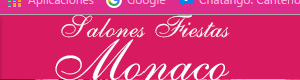
<style>
.page{position:relative;width:300px;height:80px;background:#d81b60}
.page>*{position:absolute;margin:0}
.t1{font:30px "ALSScript";color:#fff7f7}
.t2{font:58px "ALSScript";color:#ffffff}
</style>
<div class="page">
<p class="t1" style="left:61px;top:14px;width:169px;height:24px">Salones Fiestas</p>
<p class="t2" style="left:55px;top:39px;width:175px;height:42px">Monaco</p>
</div>
